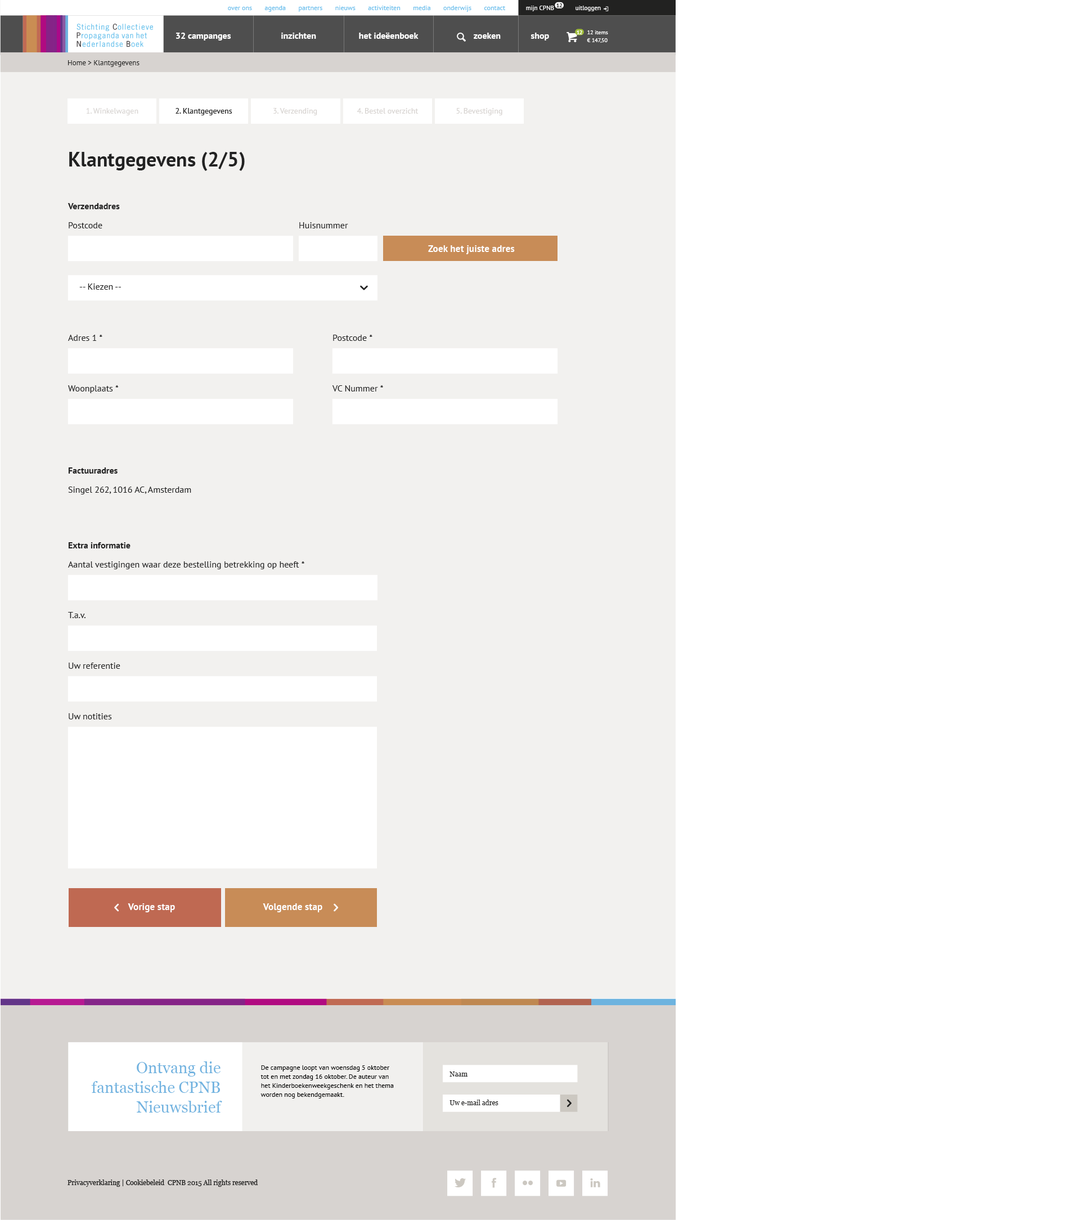
<style>
.page{position:relative;width:1088px;height:1220px;background:#ffffff}
.page>*{position:absolute;margin:0}
.t1{font:6.8px "PTSans-Regular";color:#65bdec}
.t2{font:6.2px "PTSans-Regular";color:#ffffff}
.t3{font:5.6px "PTSans-Bold";letter-spacing:-0.05em;color:#222221}
.t4{font:9px "PTSans-Bold";color:#ffffff}
.t5{font:5.6px "PTSans-Bold";letter-spacing:-0.05em;color:#ffffff}
.t6{font:5.6px/7.9px "PTSans-Regular";color:#ffffff}
.t7{font:7.3px "PTSans-Regular";color:#222221}
.t8{font:7.9px "PTSans-Regular";color:#d7d3d0}
.t9{font:7.9px "PTSans-Regular";color:#222222}
.t10{font:20.2px "PTSans-Bold";color:#222222}
.t11{font:9px "PTSans-Bold";color:#222222}
.t12{font:9px "PTSans-Regular";color:#222222}
.t13{font:9.8px "PTSans-Bold";color:#ffffff}
.t14{font:15.8px/19.7px "Georgia";color:#5daadc}
.t15{font:6.8px/9px "PTSans-Regular";color:#000000}
.t16{font:6.8px "Georgia";color:#222221}
</style>
<div class="page">
<p class="t1" style="left:228px;top:6px;width:278px;height:6px">over ons       agenda       partners       nieuws       activiteiten       media       onderwijs       contact</p>
<p class="t2" style="left:526px;top:6px;width:28px;height:5px">mijn CPNB</p>
<p class="t3" style="left:556px;top:3px;width:6px;height:4px">12</p>
<p class="t2" style="left:575px;top:6px;width:26px;height:5px">uitloggen</p>
<p class="t4" style="left:176px;top:33px;width:55px;height:7px">32 campanges</p>
<p class="t4" style="left:281px;top:33px;width:35px;height:6px">inzichten</p>
<p class="t4" style="left:359px;top:33px;width:59px;height:6px">het ideëenboek</p>
<p class="t4" style="left:474px;top:33px;width:27px;height:6px">zoeken</p>
<p class="t4" style="left:530px;top:33px;width:19px;height:7px">shop</p>
<p class="t5" style="left:577px;top:30px;width:5px;height:4px">12</p>
<p class="t6" style="left:587px;top:30px;width:21px;height:13px">12 items<br>€ 147,50</p>
<p class="t7" style="left:68px;top:60px;width:72px;height:7px">Home &gt; Klantgegevens</p>
<p class="t8" style="left:86px;top:108px;width:52px;height:7px">1. Winkelwagen</p>
<p class="t9" style="left:176px;top:108px;width:56px;height:7px">2. Klantgegevens</p>
<p class="t8" style="left:273px;top:108px;width:44px;height:7px">3. Verzending</p>
<p class="t8" style="left:357px;top:108px;width:61px;height:6px">4. Bestel overzicht</p>
<p class="t8" style="left:456px;top:108px;width:46px;height:7px">5. Bevestiging</p>
<p class="t10" style="left:69px;top:152px;width:176px;height:19px">Klantgegevens (2/5)</p>
<p class="t11" style="left:68px;top:203px;width:52px;height:6px">Verzendadres</p>
<p class="t12" style="left:69px;top:222px;width:33px;height:6px">Postcode</p>
<p class="t12" style="left:299px;top:222px;width:49px;height:6px">Huisnummer</p>
<p class="t13" style="left:428px;top:245px;width:87px;height:9px">Zoek het juiste adres</p>
<p class="t12" style="left:79px;top:284px;width:42px;height:6px">-- Kiezen --</p>
<p class="t12" style="left:68px;top:335px;width:34px;height:6px">Adres 1 *</p>
<p class="t12" style="left:333px;top:335px;width:39px;height:6px">Postcode *</p>
<p class="t12" style="left:68px;top:385px;width:51px;height:8px">Woonplaats *</p>
<p class="t12" style="left:332px;top:385px;width:51px;height:7px">VC Nummer *</p>
<p class="t11" style="left:68px;top:467px;width:50px;height:7px">Factuuradres</p>
<p class="t12" style="left:68px;top:487px;width:123px;height:7px">Singel 262, 1016 AC, Amsterdam</p>
<p class="t11" style="left:68px;top:542px;width:62px;height:6px">Extra informatie</p>
<p class="t12" style="left:68px;top:561px;width:236px;height:8px">Aantal vestigingen waar deze bestelling betrekking op heeft *</p>
<p class="t12" style="left:68px;top:612px;width:18px;height:6px">T.a.v.</p>
<p class="t12" style="left:69px;top:663px;width:51px;height:6px">Uw referentie</p>
<p class="t12" style="left:69px;top:713px;width:43px;height:6px">Uw notities</p>
<p class="t13" style="left:128px;top:903px;width:47px;height:9px">Vorige stap</p>
<p class="t13" style="left:263px;top:903px;width:59px;height:9px">Volgende stap</p>
<p class="t14" style="left:91px;top:1061px;width:131px;height:52px;text-align:right;opacity:0.9">Ontvang die<br>fantastische CPNB<br>Nieuwsbrief</p>
<p class="t15" style="left:260px;top:1065px;width:134px;height:34px">De campagne loopt van woensdag 5 oktober tot en met zondag 16 oktober. De auteur van het Kinderboekenweekgeschenk en het thema worden nog bekendgemaakt.</p>
<p class="t16" style="left:449px;top:1072px;width:18px;height:5px">Naam</p>
<p class="t16" style="left:449px;top:1100px;width:49px;height:5px">Uw e-mail adres</p>
<p class="t16" style="left:68px;top:1180px;width:190px;height:7px">Privacyverklaring | Cookiebeleid  CPNB 2015 All rights reserved</p>
</div>
